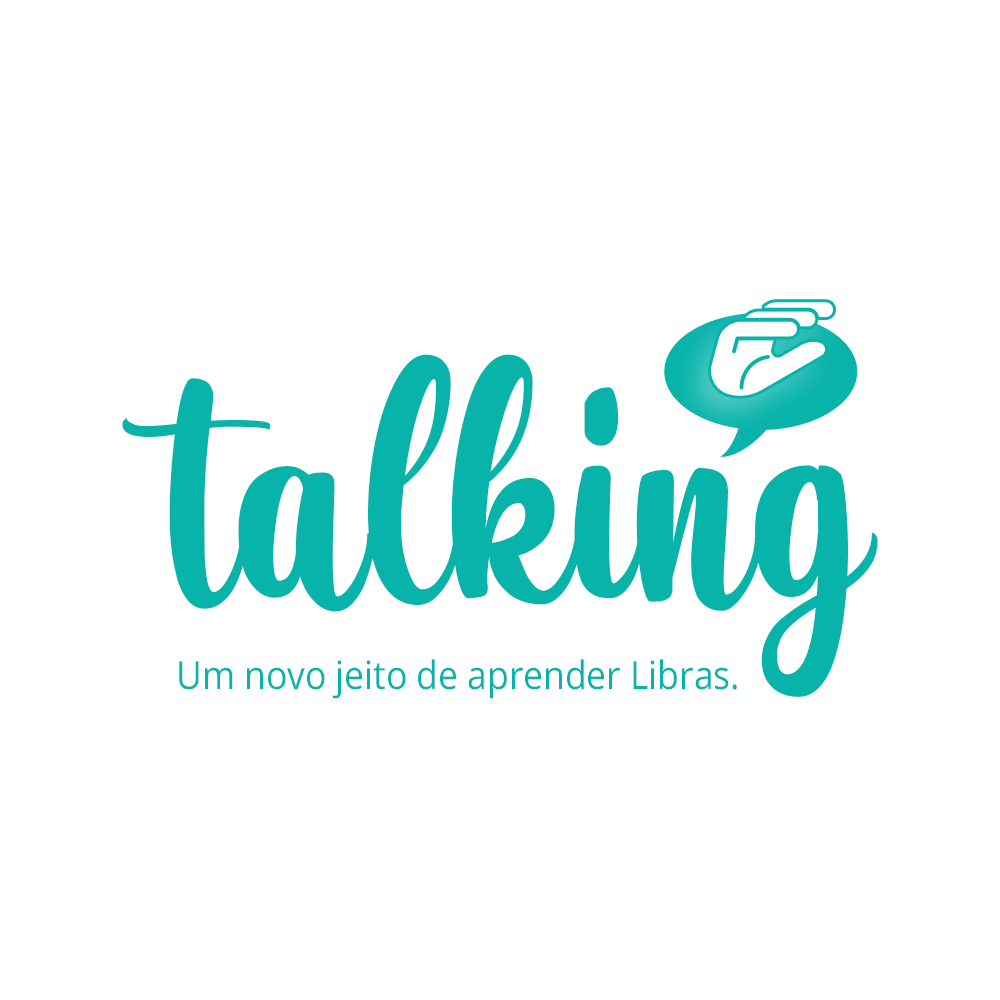
<style>
.page{position:relative;width:1000px;height:1000px;background:#ffffff}
.page>*{position:absolute;margin:0}
.t1{font:320.8px "BelladiaDemoRegular";color:#08b3aa;scale:0.95 1}
.t2{font:38.9px "OpenSans";color:#08b3aa;scale:0.91 1}
</style>
<div class="page">
<p class="t1" style="left:122px;top:354px;width:756px;height:343px">talking</p>
<p class="t2" style="left:179px;top:659px;width:558px;height:40px">Um novo jeito de aprender Libras.</p>
</div>
